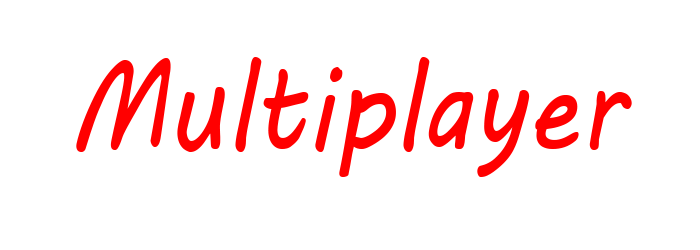
<style>
.page{position:relative;width:700px;height:250px;background:#ffffff}
.page>*{position:absolute;margin:0}
.t1{font:125px "MVBoli";color:#ff0000;scale:0.84 1}
</style>
<div class="page">
<p class="t1" style="left:76px;top:57px;width:556px;height:120px">Multiplayer</p>
</div>
